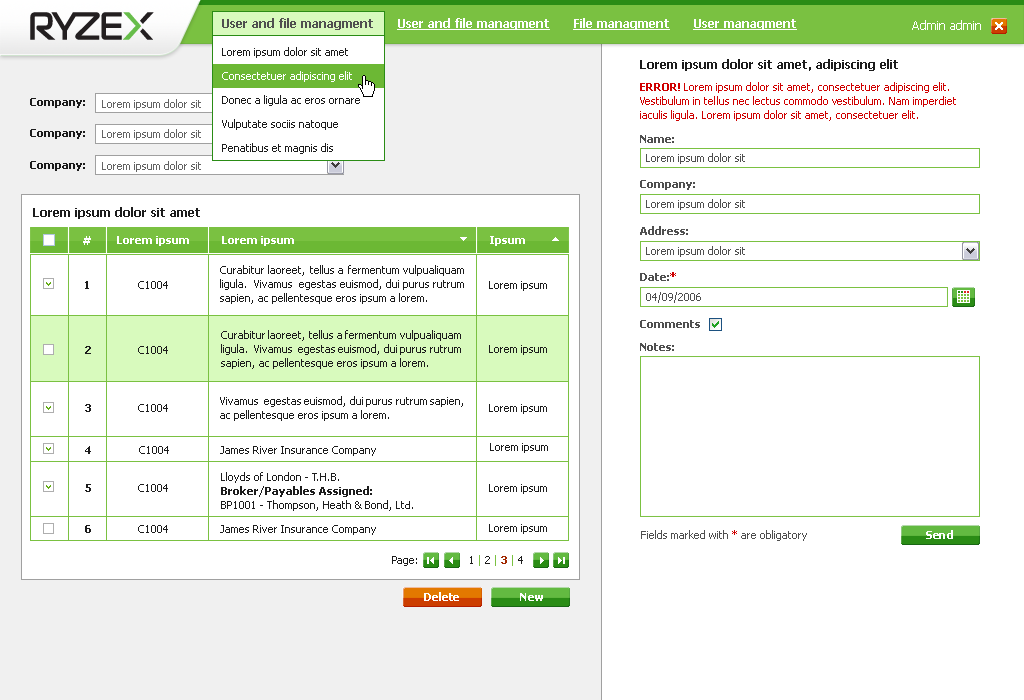
<style>
.page{position:relative;width:1024px;height:700px;background:#ffffff}
.page>*{position:absolute;margin:0}
.t1{font:12px "Tahoma-Bold";color:#ffffff;text-decoration:underline}
.t2{font:12px "Tahoma-Bold";color:#4f4f4f}
.t3{font:12px "Tahoma";color:#ffffff}
.t4{font:11px/24px "Tahoma";color:#1c1c1c}
.t5{font:11px/24px "Tahoma";color:#ffffff}
.t6{font:12px "Tahoma-Bold";color:#1c1c1c}
.t7{font:11px/14px "Tahoma";color:#cf0000}
.t8{font:11px/14px "Tahoma-Bold";color:#cf0000}
.t9{font:11px "Tahoma-Bold";color:#1c1c1c}
.t10{font:11px "Tahoma";color:#636363}
.t11{font:11px "Tahoma-Bold";color:#4f4f4f}
.t12{font:11px "Tahoma";color:#4f4f4f}
.t13{font:11px "Tahoma-Bold";color:#ffffff}
.t14{font:11px/14px "Tahoma";color:#1c1c1c}
.t15{font:11px "Tahoma";color:#1c1c1c}
.t16{font:11px "Tahoma-Bold";color:#cf0000}
.t17{font:11px/14px "Tahoma-Bold";color:#1c1c1c}
.t18{font:10px/14px "Tahoma";color:#1c1c1c}
.t19{font:11px "Tahoma";color:#cf0000}
.t20{font:11px "Tahoma";color:#7ac141}
.t21{font:11px "Tahoma-Bold";color:#a12800}
</style>
<div class="page">
<p class="t1" style="left:222px;top:18px;width:575px;height:12px"><span class="t2">User and file managment      </span>User and file managment      File managment      User managment</p>
<p class="t3" style="left:912px;top:20px;width:69px;height:10px">Admin admin</p>
<p class="t4" style="left:222px;top:47px;width:153px;height:129px">Lorem ipsum dolor sit amet<br><span class="t5">Consectetuer adipiscing elit<br></span>Donec a ligula ac eros ornare<br>Vulputate sociis natoque<br>Penatibus et magnis dis</p>
<p class="t6" style="left:640px;top:59px;width:258px;height:12px">Lorem ipsum dolor sit amet, adipiscing elit</p>
<p class="t7" style="left:640px;top:82px;width:316px;height:39px"><span class="t8">ERROR!</span> Lorem ipsum dolor sit amet, consectetuer adipiscing elit. Vestibulum in tellus nec lectus commodo vestibulum. Nam imperdiet iaculis ligula. Lorem ipsum dolor sit amet, consectetuer elit.</p>
<p class="t9" style="left:30px;top:98px;width:55px;height:10px">Company:</p>
<p class="t10" style="left:102px;top:99px;width:99px;height:11px">Lorem ipsum dolor sit</p>
<p class="t9" style="left:30px;top:129px;width:55px;height:10px">Company:</p>
<p class="t10" style="left:102px;top:129px;width:99px;height:11px">Lorem ipsum dolor sit</p>
<p class="t11" style="left:640px;top:135px;width:34px;height:8px">Name:</p>
<p class="t9" style="left:30px;top:161px;width:55px;height:10px">Company:</p>
<p class="t10" style="left:102px;top:161px;width:99px;height:11px">Lorem ipsum dolor sit</p>
<p class="t12" style="left:646px;top:153px;width:99px;height:11px">Lorem ipsum dolor sit</p>
<p class="t11" style="left:640px;top:180px;width:55px;height:10px">Company:</p>
<p class="t6" style="left:33px;top:207px;width:167px;height:12px">Lorem ipsum dolor sit amet</p>
<p class="t12" style="left:646px;top:199px;width:99px;height:11px">Lorem ipsum dolor sit</p>
<p class="t11" style="left:640px;top:226px;width:48px;height:9px">Address:</p>
<p class="t13" style="left:83px;top:236px;width:8px;height:9px">#</p>
<p class="t13" style="left:117px;top:236px;width:72px;height:10px">Lorem ipsum</p>
<p class="t13" style="left:222px;top:236px;width:72px;height:10px">Lorem ipsum</p>
<p class="t13" style="left:490px;top:236px;width:35px;height:10px">Ipsum</p>
<p class="t12" style="left:646px;top:246px;width:99px;height:11px">Lorem ipsum dolor sit</p>
<p class="t14" style="left:220px;top:265px;width:244px;height:39px;text-align:justify">Curabitur laoreet, tellus a fermentum vulpualiquam ligula.  Vivamus  egestas euismod, dui purus rutrum sapien, ac pellentesque eros ipsum a lorem.</p>
<p class="t9" style="left:85px;top:281px;width:4px;height:8px">1</p>
<p class="t15" style="left:138px;top:281px;width:30px;height:8px">C1004</p>
<p class="t15" style="left:489px;top:281px;width:58px;height:10px">Lorem ipsum</p>
<p class="t11" style="left:640px;top:272px;width:36px;height:9px">Date:<span class="t16">*</span></p>
<p class="t12" style="left:646px;top:292px;width:55px;height:11px">04/09/2006</p>
<p class="t11" style="left:640px;top:320px;width:60px;height:8px">Comments</p>
<p class="t14" style="left:221px;top:330px;width:240px;height:39px;text-align:justify">Curabitur laoreet, tellus a fermentum vulpualiquam ligula.  Vivamus  egestas euismod, dui purus rutrum sapien, ac pellentesque eros ipsum a lorem.</p>
<p class="t9" style="left:85px;top:346px;width:6px;height:8px">2</p>
<p class="t15" style="left:138px;top:346px;width:30px;height:8px">C1004</p>
<p class="t15" style="left:489px;top:345px;width:58px;height:10px">Lorem ipsum</p>
<p class="t11" style="left:640px;top:343px;width:34px;height:8px">Notes:</p>
<p class="t14" style="left:220px;top:396px;width:243px;height:25px;text-align:justify">Vivamus  egestas euismod, dui purus rutrum sapien, ac pellentesque eros ipsum a lorem.</p>
<p class="t9" style="left:85px;top:404px;width:6px;height:8px">3</p>
<p class="t15" style="left:138px;top:404px;width:30px;height:8px">C1004</p>
<p class="t15" style="left:489px;top:404px;width:58px;height:10px">Lorem ipsum</p>
<p class="t9" style="left:85px;top:446px;width:6px;height:8px">4</p>
<p class="t15" style="left:139px;top:446px;width:30px;height:8px">C1004</p>
<p class="t15" style="left:220px;top:446px;width:156px;height:10px">James River Insurance Company</p>
<p class="t15" style="left:490px;top:443px;width:58px;height:10px">Lorem ipsum</p>
<p class="t14" style="left:221px;top:472px;width:192px;height:39px;text-align:justify">Lloyds of London - T.H.B. <br><span class="t17">Broker/Payables Assigned: <br></span>BP1001 - Thompson, Heath &amp; Bond, Lt<span class="t18">d.</span></p>
<p class="t9" style="left:85px;top:484px;width:6px;height:8px">5</p>
<p class="t15" style="left:138px;top:484px;width:30px;height:8px">C1004</p>
<p class="t15" style="left:489px;top:484px;width:58px;height:10px">Lorem ipsum</p>
<p class="t9" style="left:85px;top:525px;width:6px;height:8px">6</p>
<p class="t15" style="left:138px;top:525px;width:30px;height:8px">C1004</p>
<p class="t15" style="left:220px;top:525px;width:156px;height:10px">James River Insurance Company</p>
<p class="t15" style="left:489px;top:524px;width:58px;height:10px">Lorem ipsum</p>
<p class="t12" style="left:641px;top:530px;width:166px;height:11px">Fields marked with <span class="t19">*</span> are obligatory</p>
<p class="t13" style="left:926px;top:530px;width:27px;height:9px">Send</p>
<p class="t15" style="left:392px;top:556px;width:25px;height:10px">Page:</p>
<p class="t15" style="left:470px;top:555px;width:53px;height:11px">1 <span class="t20">|</span> 2 <span class="t20">| </span><span class="t21">3 </span><span class="t20">|</span> 4</p>
<p class="t13" style="left:424px;top:592px;width:36px;height:12px">Delete</p>
<p class="t13" style="left:520px;top:592px;width:25px;height:12px">New</p>
</div>
